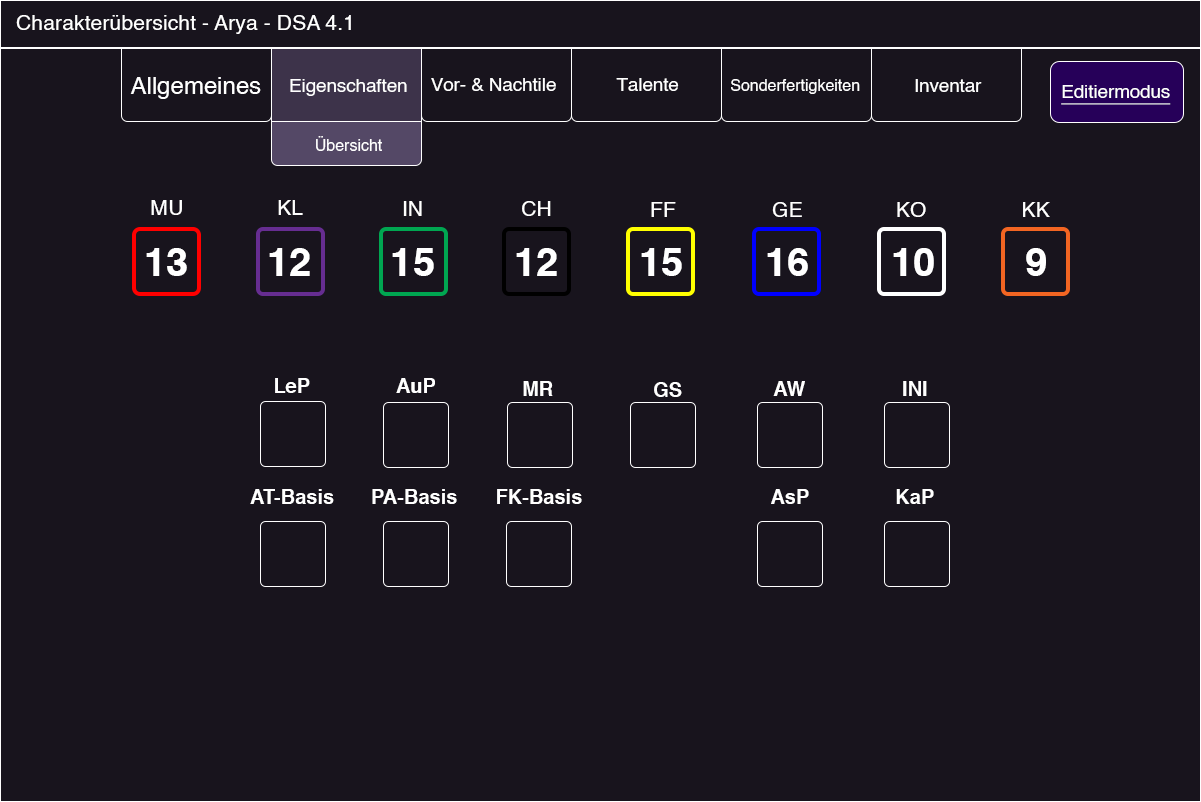
<style>
.page{position:relative;width:1201px;height:802px;background:#18141d}
.page>*{position:absolute;margin:0}
.t1{font:21.3px "Helvetica";color:#ffffff}
.t2{font:24px "Helvetica";color:#ffffff}
.t3{font:18.7px "Helvetica";color:#ffffff}
.t4{font:16px "Helvetica";color:#ffffff}
.t5{font:18.7px "Helvetica";color:#ffffff;text-decoration:underline}
.t6{font:40px "Helvetica-Bold";color:#ffffff}
.t7{font:20px "Helvetica-Bold";color:#ffffff}
</style>
<div class="page">
<p class="t1" style="left:16px;top:15px;width:335px;height:19px">Charakterübersicht - Arya - DSA 4.1</p>
<p class="t2" style="left:130px;top:77px;width:131px;height:22px">Allgemeines</p>
<p class="t3" style="left:431px;top:78px;width:125px;height:13px">Vor- &amp; Nachtile</p>
<p class="t3" style="left:616px;top:78px;width:63px;height:13px">Talente</p>
<p class="t3" style="left:290px;top:79px;width:117px;height:17px">Eigenschaften</p>
<p class="t4" style="left:731px;top:79px;width:129px;height:15px">Sonderfertigkeiten</p>
<p class="t3" style="left:915px;top:79px;width:67px;height:13px">Inventar</p>
<p class="t5" style="left:1061px;top:85px;width:110px;height:20px">Editiermodus</p>
<p class="t4" style="left:316px;top:136px;width:66px;height:15px">Übersicht</p>
<p class="t1" style="left:151px;top:200px;width:31px;height:15px">MU</p>
<p class="t1" style="left:278px;top:200px;width:25px;height:15px">KL</p>
<p class="t1" style="left:403px;top:201px;width:19px;height:15px">IN</p>
<p class="t1" style="left:522px;top:201px;width:29px;height:15px">CH</p>
<p class="t1" style="left:651px;top:202px;width:25px;height:15px">FF</p>
<p class="t1" style="left:772px;top:202px;width:30px;height:15px">GE</p>
<p class="t1" style="left:897px;top:202px;width:29px;height:15px">KO</p>
<p class="t1" style="left:1023px;top:202px;width:27px;height:15px">KK</p>
<p class="t6" style="left:146px;top:248px;width:41px;height:28px">13</p>
<p class="t6" style="left:269px;top:248px;width:41px;height:28px">12</p>
<p class="t6" style="left:392px;top:248px;width:42px;height:28px">15</p>
<p class="t6" style="left:516px;top:248px;width:41px;height:28px">12</p>
<p class="t6" style="left:641px;top:248px;width:41px;height:28px">15</p>
<p class="t6" style="left:767px;top:248px;width:41px;height:28px">16</p>
<p class="t6" style="left:893px;top:248px;width:41px;height:28px">10</p>
<p class="t6" style="left:1026px;top:248px;width:20px;height:28px">9</p>
<p class="t7" style="left:275px;top:378px;width:35px;height:15px">LeP</p>
<p class="t7" style="left:396px;top:378px;width:39px;height:15px">AuP</p>
<p class="t7" style="left:523px;top:381px;width:30px;height:15px">MR</p>
<p class="t7" style="left:654px;top:382px;width:28px;height:15px">GS</p>
<p class="t7" style="left:773px;top:381px;width:32px;height:15px">AW</p>
<p class="t7" style="left:903px;top:381px;width:24px;height:15px">INI</p>
<p class="t7" style="left:250px;top:489px;width:84px;height:15px">AT-Basis</p>
<p class="t7" style="left:372px;top:489px;width:85px;height:15px">PA-Basis</p>
<p class="t7" style="left:497px;top:489px;width:85px;height:15px">FK-Basis</p>
<p class="t7" style="left:771px;top:489px;width:38px;height:15px">AsP</p>
<p class="t7" style="left:896px;top:489px;width:38px;height:15px">KaP</p>
</div>
